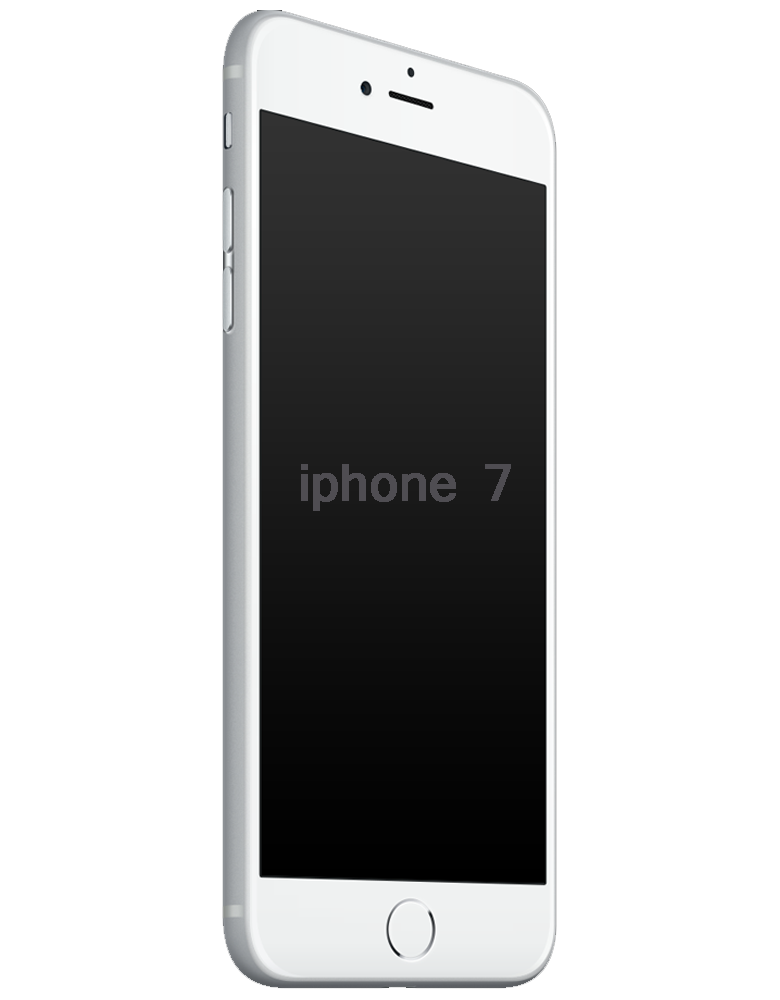
<style>
.page{position:relative;width:780px;height:1000px;background:#ffffff}
.page>*{position:absolute;margin:0}
.t1{font:49px "Mangal";color:#4f4d52;font-weight:bold}
</style>
<div class="page">
<p class="t1" style="left:301px;top:464px;width:210px;height:47px">iphone 7</p>
</div>
